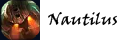
<style>
.page{position:relative;width:140px;height:40px;background:#ffffff}
.page>*{position:absolute;margin:0}
.t1{font:12px "VinerHandITC";color:#000000}
</style>
<div class="page">
<p class="t1" style="left:48px;top:12px;width:69px;height:14px">Nautilus</p>
</div>
